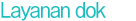
<style>
.page{position:relative;width:136px;height:21px;background:#ffffff}
.page>*{position:absolute;margin:0}
.t1{font:20px "GothicMB101Pro-Regular";letter-spacing:-0.06em;color:#1dbcc0;scale:0.9 1}
</style>
<div class="page">
<p class="t1" style="left:1px;top:2px;width:105px;height:19px">Layanan dok</p>
</div>
